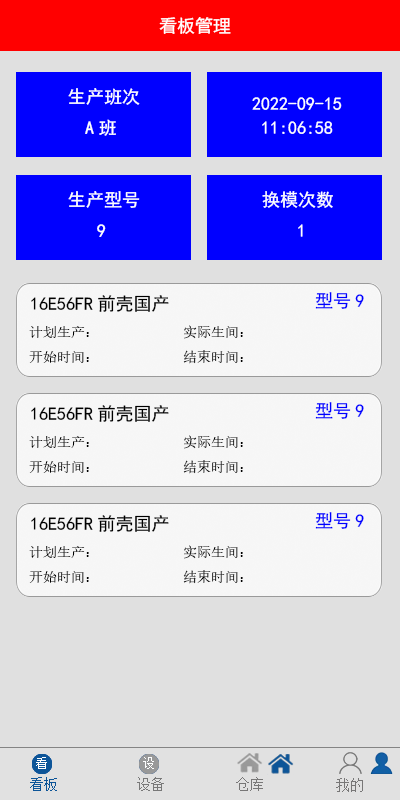
<style>
.page{position:relative;width:400px;height:800px;background:#e0e0e0}
.page>*{position:absolute;margin:0}
.t1{font:18px "SimHei";color:#ffffff}
.t2{font:18px/24px "SimHei";color:#ffffff}
.t3{font:18px "SimHei";color:#0000ff}
.t4{font:18px "SimHei";color:#000000}
.t5{font:14px "SimSun";color:#000000}
.t6{font:12px "SimSun";color:#fefefe}
.t7{font:14px "SimSun";color:#0d5598}
.t8{font:14px "SimSun";color:#787777}
</style>
<div class="page">
<p class="t1" style="left:159px;top:17px;width:72px;height:17px">看板管理</p>
<p class="t1" style="left:68px;top:88px;width:72px;height:17px">生产班次</p>
<p class="t2" style="left:252px;top:97px;width:90px;height:37px;text-align:center">2022-09-15<br>11:06:58</p>
<p class="t1" style="left:85px;top:119px;width:31px;height:17px">A班</p>
<p class="t1" style="left:68px;top:191px;width:72px;height:17px">生产型号</p>
<p class="t1" style="left:262px;top:191px;width:71px;height:17px">换模次数</p>
<p class="t1" style="left:97px;top:224px;width:9px;height:13px">9</p>
<p class="t1" style="left:298px;top:224px;width:5px;height:13px">1</p>
<p class="t3" style="left:315px;top:292px;width:49px;height:17px">型号9</p>
<p class="t4" style="left:31px;top:295px;width:138px;height:17px">16E56FR前壳国产</p>
<p class="t5" style="left:29px;top:326px;width:60px;height:12px">计划生产：</p>
<p class="t5" style="left:184px;top:325px;width:59px;height:14px">实际生间：</p>
<p class="t5" style="left:29px;top:351px;width:60px;height:12px">开始时间：</p>
<p class="t5" style="left:183px;top:350px;width:60px;height:14px">结束时间：</p>
<p class="t4" style="left:31px;top:405px;width:138px;height:17px">16E56FR前壳国产</p>
<p class="t3" style="left:315px;top:402px;width:49px;height:17px">型号9</p>
<p class="t5" style="left:29px;top:436px;width:60px;height:12px">计划生产：</p>
<p class="t5" style="left:184px;top:435px;width:59px;height:14px">实际生间：</p>
<p class="t5" style="left:29px;top:461px;width:60px;height:12px">开始时间：</p>
<p class="t5" style="left:183px;top:460px;width:60px;height:14px">结束时间：</p>
<p class="t4" style="left:31px;top:515px;width:138px;height:17px">16E56FR前壳国产</p>
<p class="t3" style="left:315px;top:512px;width:49px;height:17px">型号9</p>
<p class="t5" style="left:184px;top:545px;width:59px;height:14px">实际生间：</p>
<p class="t5" style="left:29px;top:546px;width:60px;height:12px">计划生产：</p>
<p class="t5" style="left:29px;top:571px;width:60px;height:12px">开始时间：</p>
<p class="t5" style="left:183px;top:570px;width:60px;height:14px">结束时间：</p>
<p class="t6" style="left:36px;top:757px;width:11px;height:12px">看</p>
<p class="t6" style="left:143px;top:757px;width:11px;height:12px">设</p>
<p class="t7" style="left:30px;top:777px;width:27px;height:14px">看板</p>
<p class="t8" style="left:137px;top:777px;width:27px;height:14px">设备</p>
<p class="t8" style="left:236px;top:777px;width:27px;height:14px">仓库</p>
<p class="t8" style="left:336px;top:778px;width:27px;height:14px">我的</p>
</div>
